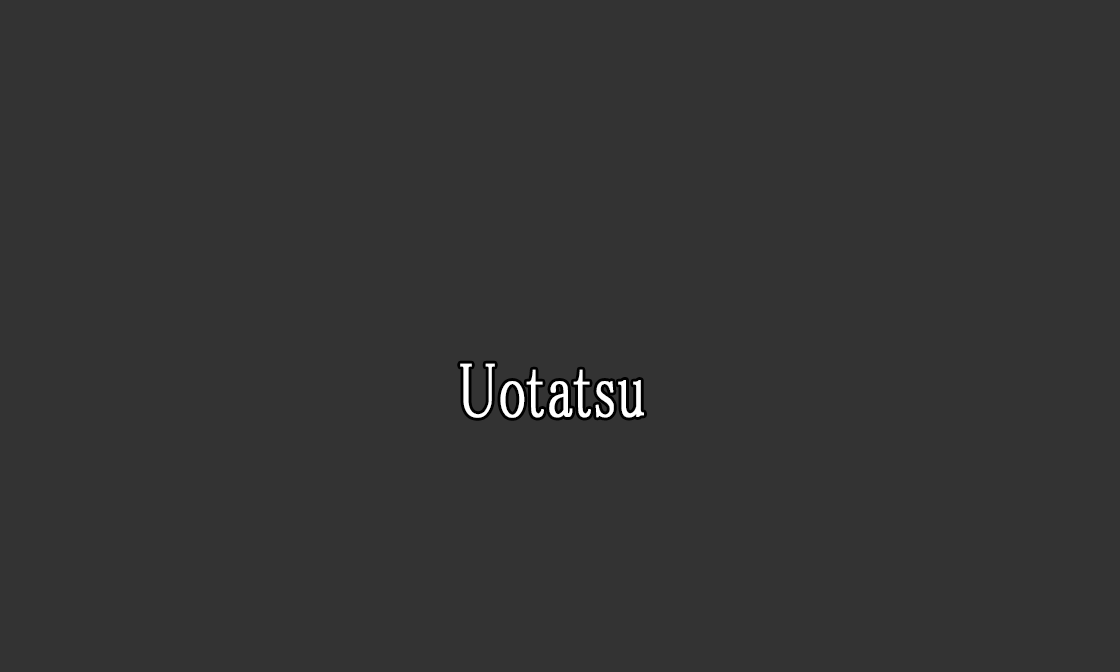
<style>
.page{position:relative;width:1120px;height:672px;background:#333333}
.page>*{position:absolute;margin:0}
.t1{font:78.4px "MS-PMincho";color:#ffffff;font-weight:bold;scale:0.69 1}
</style>
<div class="page">
<p class="t1" style="left:460px;top:363px;width:184px;height:55px">Uotatsu</p>
</div>
